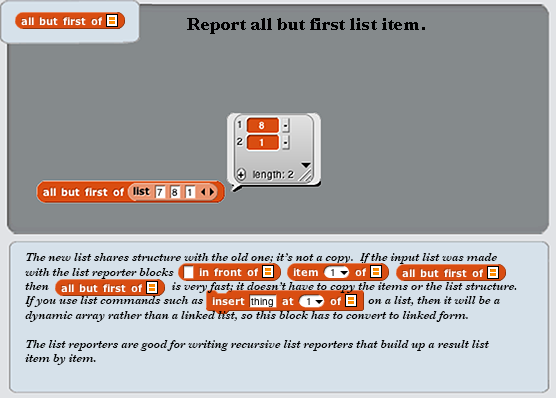
<style>
.page{position:relative;width:556px;height:398px;background:#858a8c}
.page>*{position:absolute;margin:0}
.t1{font:18px "Baskerville-Bold";color:#000000}
.t2{font:12px "Baskerville-SemiBoldItalic";color:#000000}
</style>
<div class="page">
<p class="t1" style="left:187px;top:18px;width:238px;height:16px">Report all but first list item.</p>
<p class="t2" style="left:25px;top:253px;width:492px;height:112px">The new list shares structure with the old one; it’s not a copy.  If the input list was made<br>with the list reporter blocks<br>then                                         is very fast; it doesn’t have to copy the items or the list structure.<br>If you use list commands such as                                                       on a list, then it will be a<br>dynamic array rather than a linked list, so this block has to convert to linked form.<br><br>The list reporters are good for writing recursive list reporters that build up a result list<br>item by item.</p>
</div>
